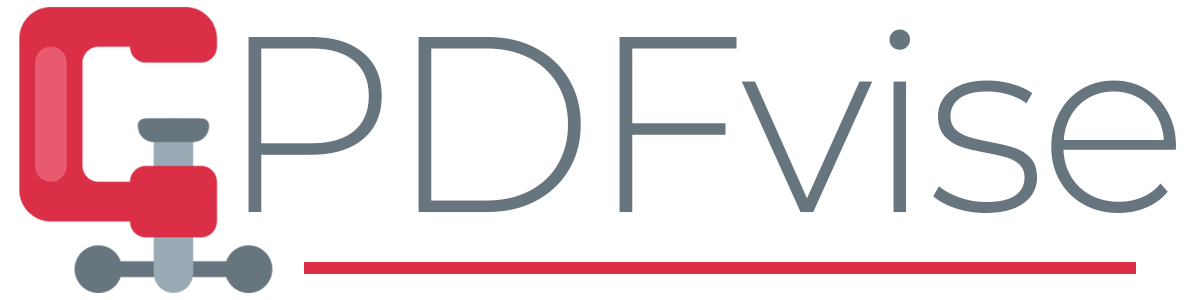
<style>
.page{position:relative;width:1200px;height:300px;background:#ffffff}
.page>*{position:absolute;margin:0}
.t1{font:250px "Montserrat-Light";letter-spacing:-0.025em;color:#67757f}
</style>
<div class="page">
<p class="t1" style="left:248px;top:29px;width:928px;height:184px">PDFvise</p>
</div>
